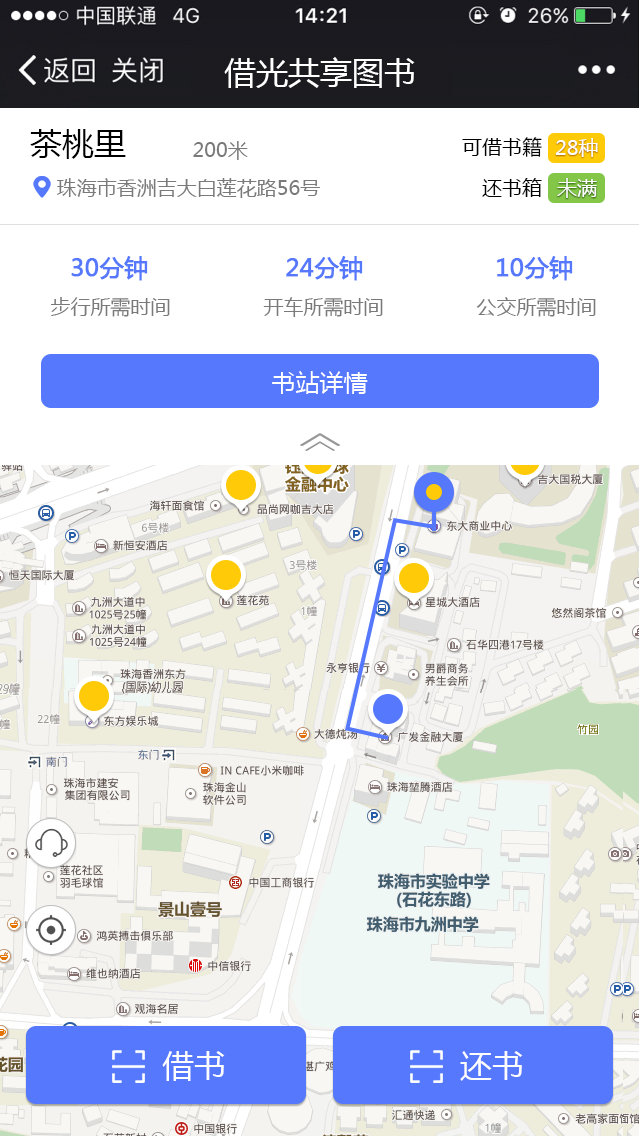
<style>
.page{position:relative;width:639px;height:1136px;background:#ffffff}
.page>*{position:absolute;margin:0}
.t1{font:32px "MicrosoftYaHei";color:#000000}
.t2{font:20px "MicrosoftYaHei";color:#000000}
.t3{font:20px "MicrosoftYaHei";color:#7a7a7a}
.t4{font:20px "MicrosoftYaHei";color:#ffffff}
.t5{font:24px "MicrosoftYaHei";color:#5578fc;font-weight:bold}
.t6{font:24px "MicrosoftYaHei";color:#ffffff}
.t7{font:32px "MicrosoftYaHei";color:#fefefe}
</style>
<div class="page">
<p class="t1" style="left:30px;top:129px;width:96px;height:30px">茶桃里</p>
<p class="t2" style="left:462px;top:137px;width:80px;height:20px">可借书籍</p>
<p class="t3" style="left:193px;top:141px;width:55px;height:19px">200米</p>
<p class="t4" style="left:555px;top:138px;width:43px;height:19px">28种</p>
<p class="t3" style="left:57px;top:178px;width:263px;height:20px">珠海市香洲吉大白莲花路56号</p>
<p class="t2" style="left:482px;top:178px;width:60px;height:19px">还书箱</p>
<p class="t4" style="left:557px;top:178px;width:40px;height:20px">未满</p>
<p class="t5" style="left:71px;top:256px;width:77px;height:25px">30分钟</p>
<p class="t5" style="left:286px;top:256px;width:77px;height:25px">24分钟</p>
<p class="t5" style="left:497px;top:256px;width:76px;height:25px">10分钟</p>
<p class="t3" style="left:50px;top:297px;width:120px;height:20px">步行所需时间</p>
<p class="t3" style="left:263px;top:297px;width:120px;height:20px">开车所需时间</p>
<p class="t3" style="left:476px;top:297px;width:120px;height:20px">公交所需时间</p>
<p class="t6" style="left:272px;top:371px;width:96px;height:23px">书站详情</p>
<p class="t7" style="left:162px;top:1051px;width:63px;height:30px">借书</p>
<p class="t7" style="left:460px;top:1051px;width:63px;height:30px">还书</p>
</div>
